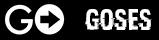
<style>
.page{position:relative;width:159px;height:40px;background:#000000}
.page>*{position:absolute;margin:0}
.t1{font:30px "HACKED";color:#ffffff;scale:0.9 1}
</style>
<div class="page">
<p class="t1" style="left:85px;top:9px;width:67px;height:21px">GOSES</p>
</div>
